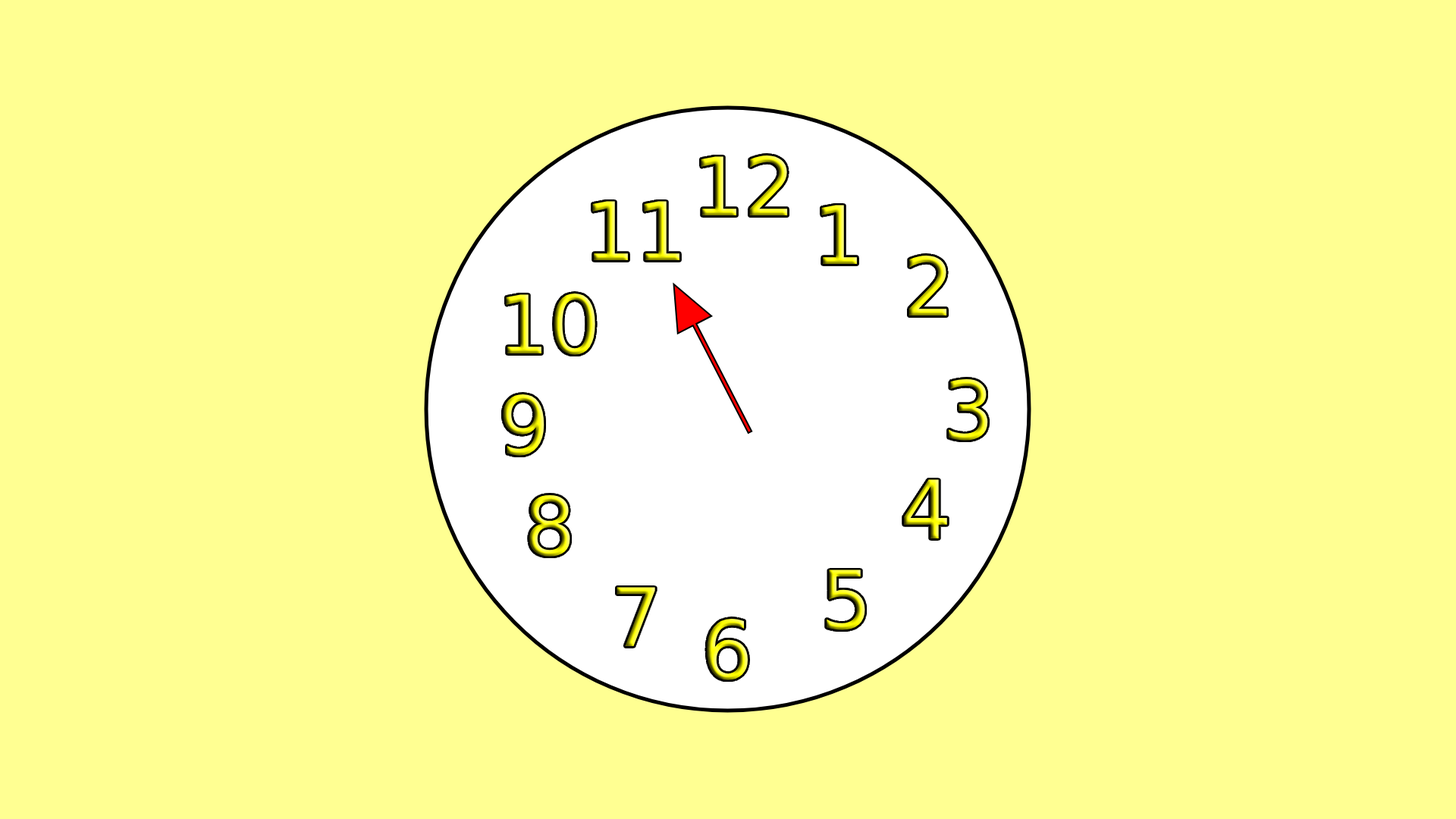
<style>
.page{position:relative;width:1456px;height:819px;background:#ffff92}
.page>*{position:absolute;margin:0}
.t1{font:80.7px "DejaVuSans"}
</style>
<div class="page">
<p class="t1" style="left:701px;top:155px;width:87px;height:60px">12</p>
<p class="t1" style="left:592px;top:201px;width:87px;height:59px">11</p>
<p class="t1" style="left:821px;top:205px;width:36px;height:59px">1</p>
<p class="t1" style="left:908px;top:255px;width:39px;height:60px">2</p>
<p class="t1" style="left:506px;top:293px;width:89px;height:62px">10</p>
<p class="t1" style="left:949px;top:378px;width:39px;height:63px">3</p>
<p class="t1" style="left:503px;top:394px;width:41px;height:62px">9</p>
<p class="t1" style="left:904px;top:479px;width:43px;height:59px">4</p>
<p class="t1" style="left:529px;top:494px;width:41px;height:63px">8</p>
<p class="t1" style="left:827px;top:570px;width:38px;height:60px">5</p>
<p class="t1" style="left:617px;top:587px;width:38px;height:59px">7</p>
<p class="t1" style="left:707px;top:618px;width:41px;height:62px">6</p>
</div>
